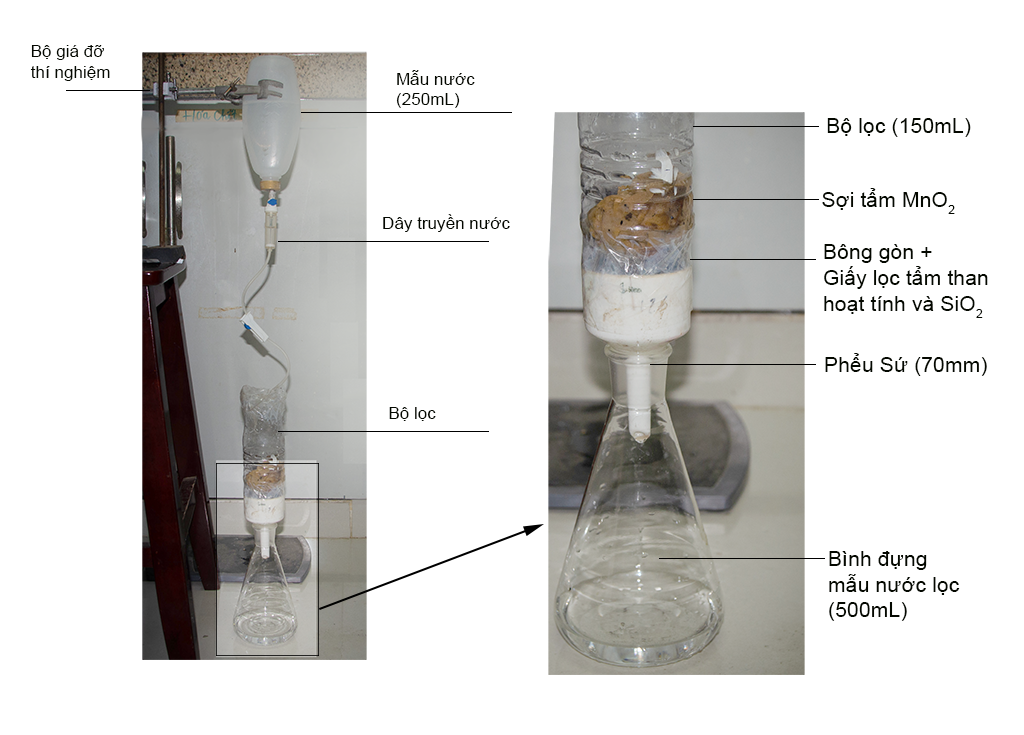
<style>
.page{position:relative;width:1024px;height:735px;background:#ffffff}
.page>*{position:absolute;margin:0}
.t1{font:17.1px "ArialMT";color:#040800}
.t2{font:21.3px "ArialMT";color:#040800}
</style>
<div class="page">
<p class="t1" style="left:30px;top:45px;width:80px;height:36px">Bộ giá đỡ<br>thí nghiệm</p>
<p class="t1" style="left:396px;top:70px;width:79px;height:38px">Mẫu nước <br>(250mL)</p>
<p class="t2" style="left:827px;top:118px;width:144px;height:19px">Bộ lọc (150mL)</p>
<p class="t2" style="left:822px;top:188px;width:133px;height:26px">Sợi tẩm MnO2</p>
<p class="t1" style="left:383px;top:214px;width:127px;height:18px">Dây truyền nước</p>
<p class="t2" style="left:824px;top:244px;width:164px;height:74px">Bông gòn + <br>Giấy lọc tẩm than <br>hoạt tính và SiO2</p>
<p class="t2" style="left:825px;top:353px;width:162px;height:23px">Phểu Sứ (70mm)</p>
<p class="t1" style="left:389px;top:407px;width:47px;height:14px">Bộ lọc</p>
<p class="t2" style="left:829px;top:551px;width:131px;height:70px">Bình đựng <br>mẫu nước lọc<br>(500mL)</p>
</div>
